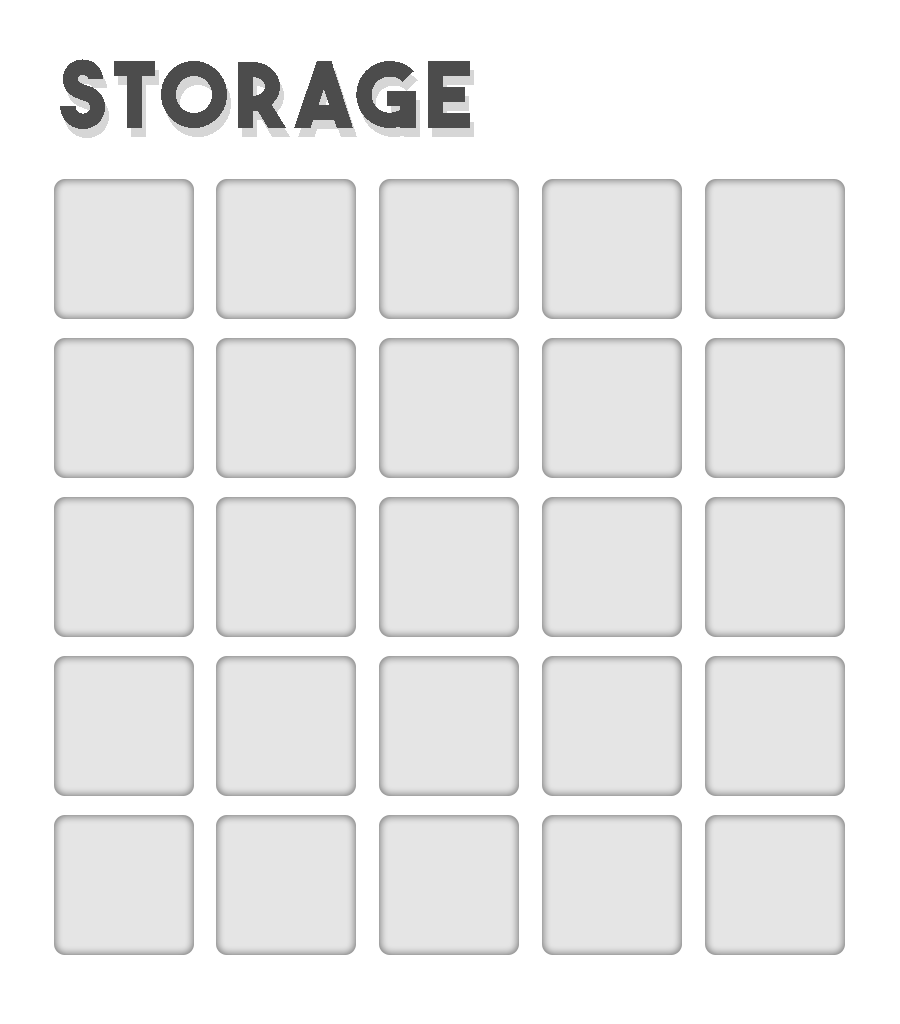
<style>
.page{position:relative;width:900px;height:1024px;background:#ffffff}
.page>*{position:absolute;margin:0}
.t1{font:91.3px "TheBoldFont";letter-spacing:0.05em;color:#4c4c4c}
</style>
<div class="page">
<p class="t1" style="left:60px;top:59px;width:410px;height:70px">Storage</p>
</div>
